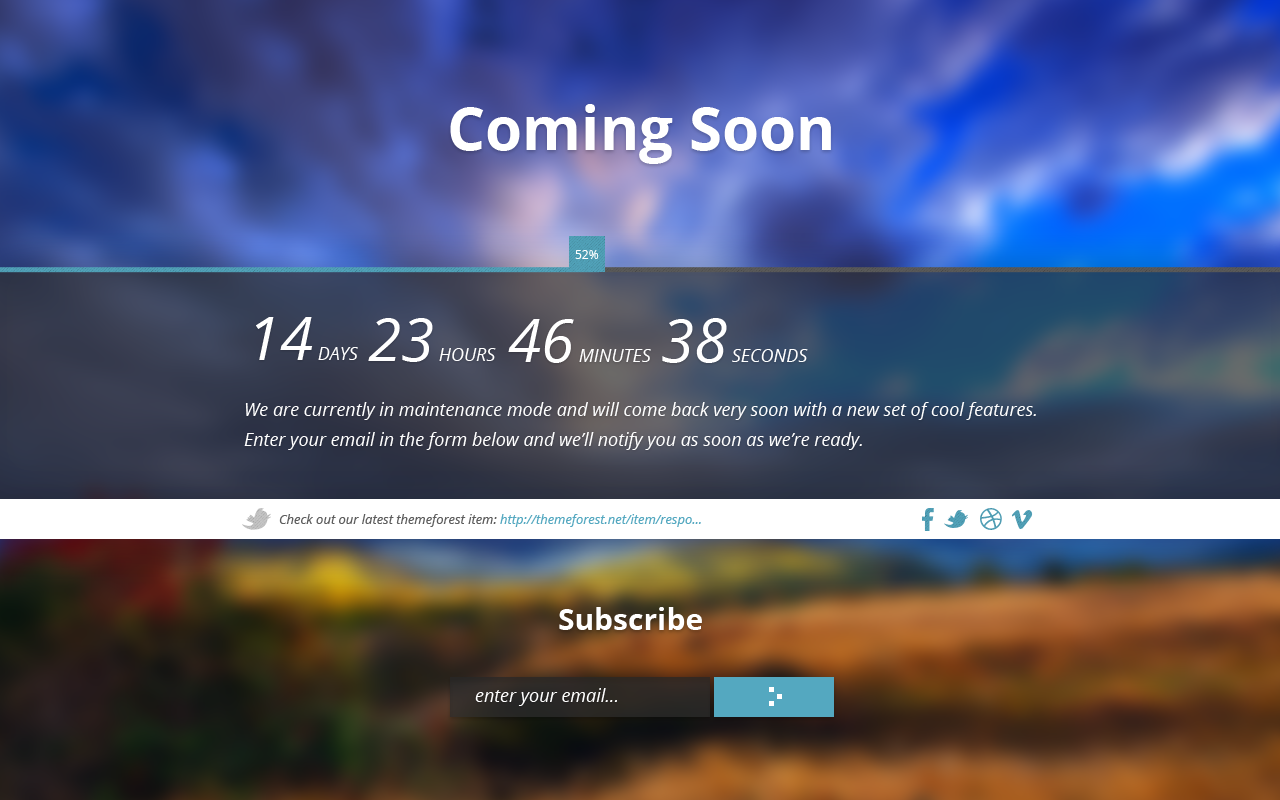
<style>
.page{position:relative;width:1280px;height:800px}
.page>*{position:absolute;margin:0}
.t1{font:60px "OpenSans-Bold";color:#ffffff}
.t2{font:12px "OpenSans";color:#ffffff}
.t3{font:18px "OpenSans-Italic";color:#ffffff}
.t4{font:60px "OpenSans-Italic";color:#ffffff}
.t5{font:18px/30px "OpenSans-Italic";color:#ffffff}
.t6{font:13px "OpenSans-Italic";color:#5d5d5d}
.t7{font:13px "OpenSans-Italic";color:#54a8c0}
.t8{font:30px "OpenSans-Bold";color:#ffffff}
</style>
<div class="page">
<p class="t1" style="left:450px;top:104px;width:381px;height:60px">Coming Soon</p>
<p class="t2" style="left:575px;top:250px;width:24px;height:9px">52%</p>
<p class="t3" style="left:256px;top:317px;width:102px;height:43px"><span class="t4">14</span> DAYS</p>
<p class="t3" style="left:368px;top:318px;width:128px;height:44px"><span class="t4">23</span> HOURS</p>
<p class="t3" style="left:662px;top:318px;width:146px;height:45px"><span class="t4">38</span> SECONDS</p>
<p class="t3" style="left:508px;top:319px;width:143px;height:44px"><span class="t4">46</span> MINUTES</p>
<p class="t5" style="left:244px;top:402px;width:792px;height:48px">We are currently in maintenance mode and will come back very soon with a new set of cool features.<br>Enter your email in the form below and we’ll notify you as soon as we’re ready.</p>
<p class="t6" style="left:279px;top:514px;width:422px;height:13px">Check out our latest themeforest item: <span class="t7">http://themeforest.net/item/respo...</span></p>
<p class="t8" style="left:559px;top:607px;width:143px;height:23px">Subscribe</p>
<p class="t3" style="left:475px;top:688px;width:142px;height:18px">enter your email...</p>
</div>
